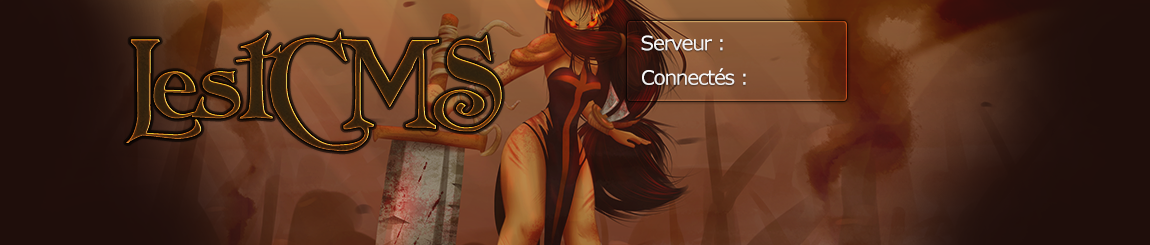
<style>
.page{position:relative;width:1150px;height:245px}
.page>*{position:absolute;margin:0}
.t1{font:20px "Verdana";letter-spacing:-0.06em;color:#f3f3f3}
.t2{font:20px "Verdana";letter-spacing:-0.06em;color:#f2f2f2}
</style>
<div class="page">
<p class="t1" style="left:641px;top:35px;width:82px;height:16px">Serveur :</p>
<p class="t2" style="left:642px;top:68px;width:104px;height:17px">Connectés :</p>
</div>
